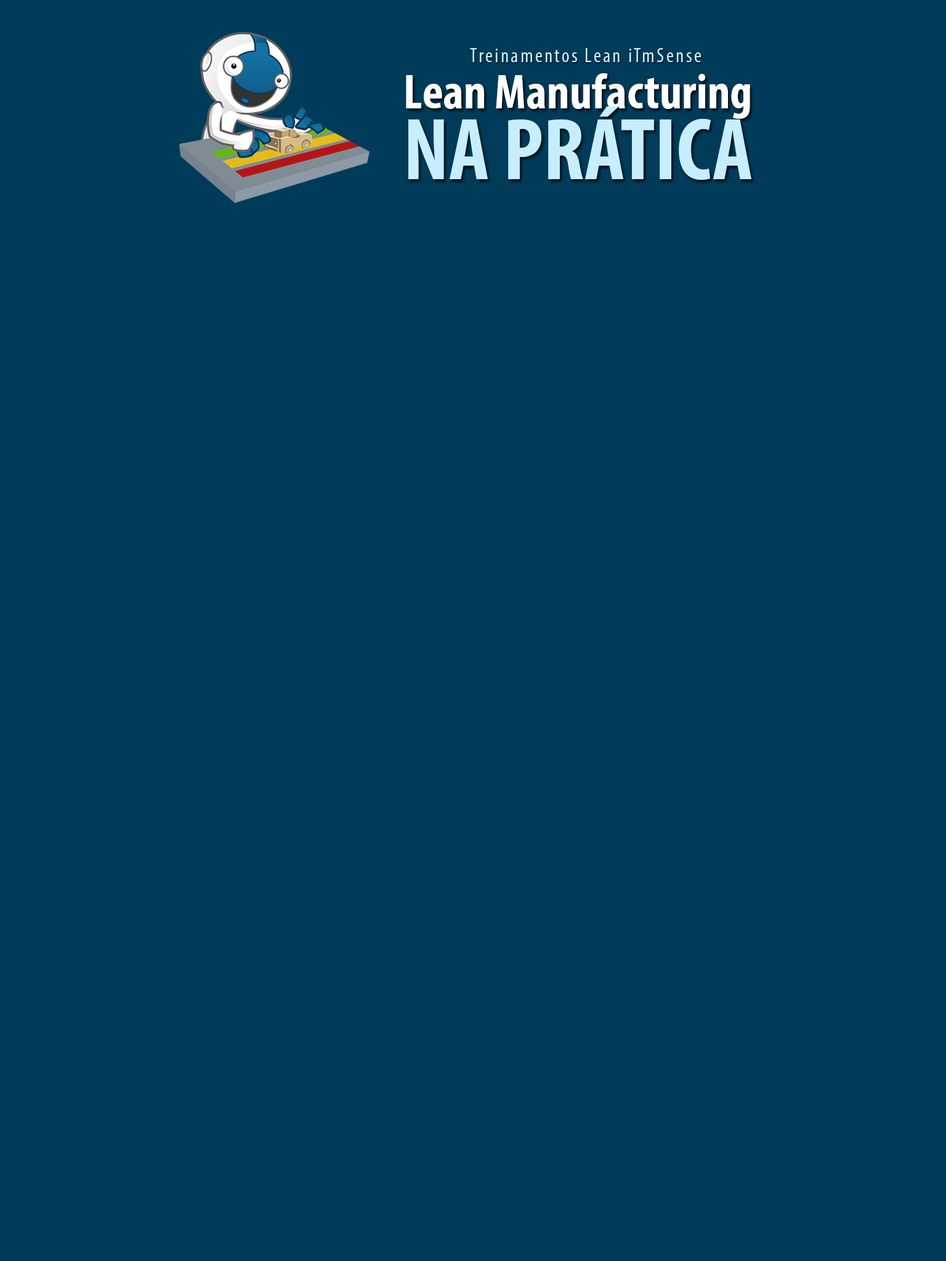
<style>
.page{position:relative;width:946px;height:1261px;background:#003b5a}
.page>*{position:absolute;margin:0}
.t1{font:20.3px "MyriadPro-Cond";letter-spacing:0.1em;color:#c7eeff}
.t2{font:49.8px/71.1px "MyriadPro-BoldCond";color:#ffffff}
.t3{font:88.3px/71.1px "MyriadPro-BoldCond";color:#c7eeff}
</style>
<div class="page">
<p class="t1" style="left:470px;top:48px;width:231px;height:14px">Treinamentos Lean iTmSense</p>
<p class="t2" style="left:406px;top:73px;width:345px;height:107px">Lean Manufacturing<br><span class="t3">NA PRÁTICA</span></p>
</div>
